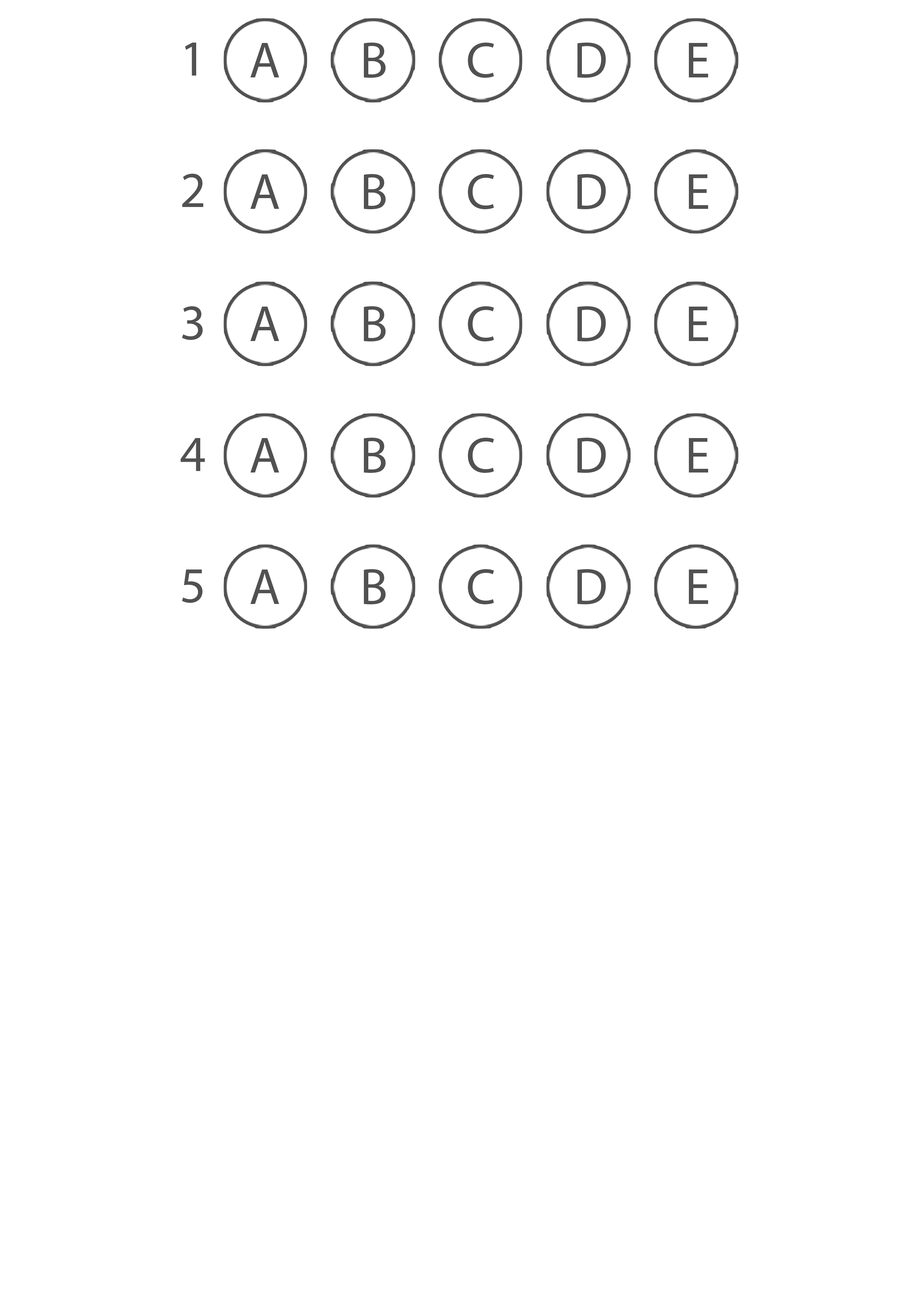
<style>
.page{position:relative;width:918px;height:1299px;background:#ffffff}
.page>*{position:absolute;margin:0}
.t1{font:50.8px "MyriadPro-Regular";letter-spacing:-0.04em;color:#515151}
</style>
<div class="page">
<p class="t1" style="left:185px;top:43px;width:11px;height:33px">1</p>
<p class="t1" style="left:250px;top:43px;width:29px;height:34px">A</p>
<p class="t1" style="left:364px;top:43px;width:22px;height:35px">B</p>
<p class="t1" style="left:468px;top:43px;width:26px;height:35px">C</p>
<p class="t1" style="left:578px;top:43px;width:28px;height:35px">D</p>
<p class="t1" style="left:689px;top:43px;width:20px;height:34px">E</p>
<p class="t1" style="left:182px;top:174px;width:22px;height:33px">2</p>
<p class="t1" style="left:250px;top:174px;width:29px;height:35px">A</p>
<p class="t1" style="left:364px;top:174px;width:22px;height:35px">B</p>
<p class="t1" style="left:468px;top:174px;width:26px;height:35px">C</p>
<p class="t1" style="left:578px;top:174px;width:28px;height:35px">D</p>
<p class="t1" style="left:689px;top:174px;width:20px;height:35px">E</p>
<p class="t1" style="left:182px;top:306px;width:21px;height:34px">3</p>
<p class="t1" style="left:250px;top:307px;width:29px;height:34px">A</p>
<p class="t1" style="left:364px;top:306px;width:22px;height:35px">B</p>
<p class="t1" style="left:468px;top:306px;width:26px;height:35px">C</p>
<p class="t1" style="left:578px;top:306px;width:28px;height:35px">D</p>
<p class="t1" style="left:689px;top:307px;width:20px;height:34px">E</p>
<p class="t1" style="left:181px;top:438px;width:24px;height:33px">4</p>
<p class="t1" style="left:250px;top:438px;width:29px;height:34px">A</p>
<p class="t1" style="left:364px;top:438px;width:22px;height:35px">B</p>
<p class="t1" style="left:468px;top:438px;width:26px;height:35px">C</p>
<p class="t1" style="left:578px;top:438px;width:28px;height:35px">D</p>
<p class="t1" style="left:689px;top:438px;width:20px;height:34px">E</p>
<p class="t1" style="left:182px;top:569px;width:21px;height:34px">5</p>
<p class="t1" style="left:250px;top:569px;width:29px;height:35px">A</p>
<p class="t1" style="left:364px;top:569px;width:22px;height:35px">B</p>
<p class="t1" style="left:468px;top:569px;width:26px;height:35px">C</p>
<p class="t1" style="left:578px;top:569px;width:28px;height:35px">D</p>
<p class="t1" style="left:689px;top:569px;width:20px;height:35px">E</p>
</div>
